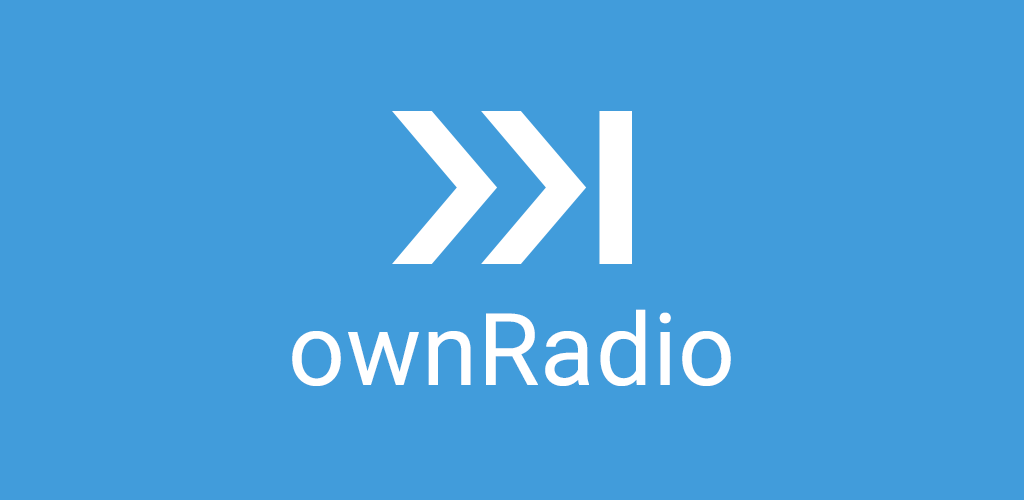
<style>
.page{position:relative;width:1024px;height:500px;background:#419cdb}
.page>*{position:absolute;margin:0}
.t1{font:100.1px "Roboto-Regular";letter-spacing:0.01em;color:#ffffff}
</style>
<div class="page">
<p class="t1" style="left:292px;top:309px;width:439px;height:77px">ownRadio</p>
</div>
